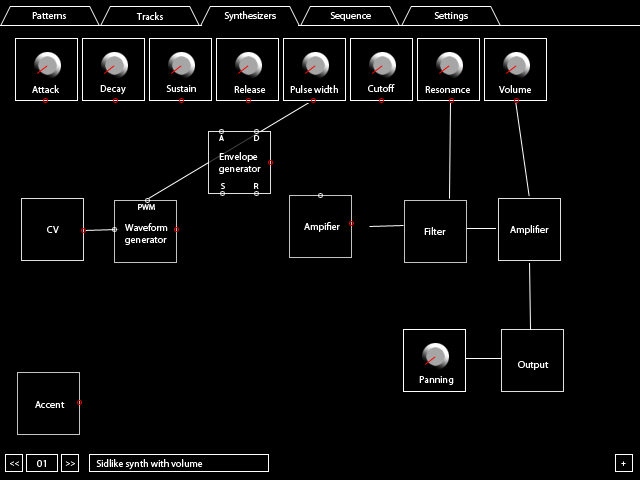
<style>
.page{position:relative;width:640px;height:480px;background:#000000}
.page>*{position:absolute;margin:0}
.t1{font:10px "MyriadPro-Regular";color:#ffffff}
.t2{font:8px "MyriadPro-Regular";color:#ffffff}
.t3{font:8px "MyriadPro-Regular"}
</style>
<div class="page">
<p class="t1" style="left:32px;top:12px;width:34px;height:7px">Patterns</p>
<p class="t1" style="left:136px;top:12px;width:27px;height:8px">Tracks</p>
<p class="t1" style="left:224px;top:11px;width:52px;height:11px">Synthesizers</p>
<p class="t1" style="left:330px;top:12px;width:41px;height:9px">Sequence</p>
<p class="t1" style="left:434px;top:12px;width:34px;height:9px">Settings</p>
<p class="t1" style="left:32px;top:85px;width:27px;height:8px">Attack</p>
<p class="t1" style="left:166px;top:85px;width:30px;height:7px">Sustain</p>
<p class="t1" style="left:234px;top:85px;width:32px;height:8px">Release</p>
<p class="t1" style="left:290px;top:85px;width:48px;height:8px">Pulse width</p>
<p class="t1" style="left:368px;top:84px;width:27px;height:8px">Cutoff</p>
<p class="t1" style="left:425px;top:86px;width:45px;height:7px">Resonance</p>
<p class="t1" style="left:499px;top:85px;width:32px;height:8px">Volume</p>
<p class="t2" style="left:219px;top:135px;width:5px;height:6px">A</p>
<p class="t2" style="left:254px;top:135px;width:6px;height:6px">D</p>
<p class="t1" style="left:219px;top:152px;width:42px;height:22px">Envelope<br>generator</p>
<p class="t2" style="left:221px;top:183px;width:4px;height:6px">S</p>
<p class="t2" style="left:254px;top:183px;width:5px;height:6px">R</p>
<p class="t2" style="left:138px;top:204px;width:17px;height:6px">PWM</p>
<p class="t1" style="left:304px;top:222px;width:36px;height:10px">Ampifier</p>
<p class="t1" style="left:47px;top:226px;width:12px;height:7px">CV</p>
<p class="t1" style="left:125px;top:223px;width:43px;height:22px">Waveform<br>generator</p>
<p class="t1" style="left:424px;top:227px;width:22px;height:8px">Filter</p>
<p class="t1" style="left:510px;top:225px;width:39px;height:10px">Amplifier</p>
<p class="t1" style="left:518px;top:361px;width:31px;height:9px">Output</p>
<p class="t1" style="left:419px;top:376px;width:35px;height:9px">Panning</p>
<p class="t1" style="left:35px;top:401px;width:30px;height:7px">Accent</p>
<p class="t3" style="left:10px;top:461px;width:10px;height:5px">&lt;&lt;</p>
<p class="t1" style="left:37px;top:460px;width:9px;height:7px">01</p>
<p class="t3" style="left:65px;top:461px;width:10px;height:5px">&gt;&gt;</p>
<p class="t1" style="left:96px;top:459px;width:107px;height:11px">Sidlike synth with volume</p>
<p class="t2" style="left:621px;top:461px;width:5px;height:5px">+</p>
</div>
